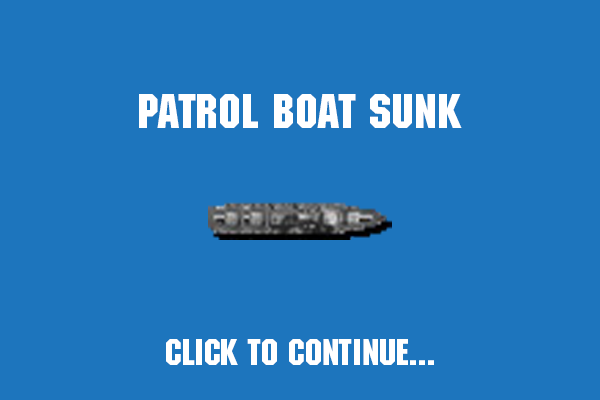
<style>
.page{position:relative;width:600px;height:400px;background:#1d75bd}
.page>*{position:absolute;margin:0}
.t1{font:48px "MachineStd";color:#ffffff}
.t2{font:36px "MachineStd";color:#ffffff}
</style>
<div class="page">
<p class="t1" style="left:139px;top:94px;width:323px;height:34px">PATROL BOAt SUNK</p>
<p class="t2" style="left:166px;top:339px;width:268px;height:26px">Click to continue...</p>
</div>
